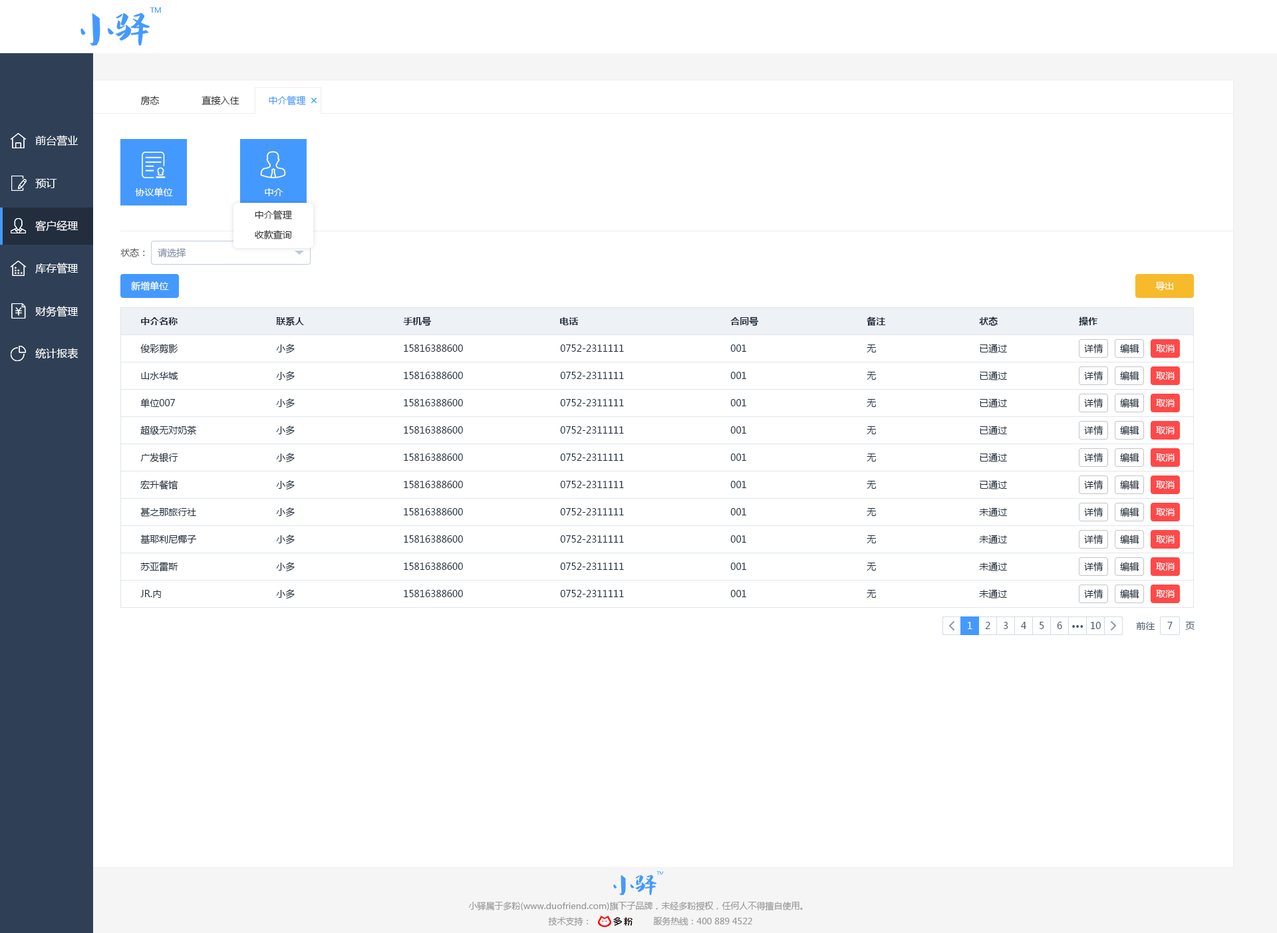
<style>
.page{position:relative;width:1277px;height:933px;background:#ffffff}
.page>*{position:absolute;margin:0}
.t1{font:9.3px "MicrosoftYaHei";color:#333333}
.t2{font:9.3px "MicrosoftYaHei";color:#4499ff}
.t3{font:10.6px "MicrosoftYaHei";color:#ffffff}
.t4{font:9.3px "MicrosoftYaHei";color:#ffffff}
.t5{font:9.3px "MicrosoftYaHei";color:#505050}
.t6{font:9.3px "MicrosoftYaHei";color:#8391a5}
.t7{font:9.3px "MicrosoftYaHei-Bold";color:#1f2d3d}
.t8{font:9.3px "MicrosoftYaHei";color:#1f2d3d}
.t9{font:9.3px "MicrosoftYaHei";color:#48576a}
.t10{font:9.3px "MicrosoftYaHei-Bold";color:#48576a}
.t11{font:8.6px "MicrosoftYaHei";color:#999999}
</style>
<div class="page">
<p class="t1" style="left:140px;top:96px;width:20px;height:9px">房态</p>
<p class="t1" style="left:202px;top:96px;width:38px;height:9px">直接入住</p>
<p class="t2" style="left:269px;top:96px;width:37px;height:10px">中介管理</p>
<p class="t3" style="left:35px;top:135px;width:44px;height:11px">前台营业</p>
<p class="t3" style="left:35px;top:178px;width:22px;height:10px">预订</p>
<p class="t4" style="left:135px;top:188px;width:38px;height:9px">协议单位</p>
<p class="t4" style="left:265px;top:188px;width:18px;height:8px">中介</p>
<p class="t3" style="left:35px;top:220px;width:44px;height:12px">客户经理</p>
<p class="t1" style="left:255px;top:210px;width:37px;height:10px">中介管理</p>
<p class="t1" style="left:255px;top:230px;width:37px;height:10px">收款查询</p>
<p class="t5" style="left:120px;top:248px;width:25px;height:9px">状态：</p>
<p class="t6" style="left:158px;top:248px;width:28px;height:9px">请选择</p>
<p class="t3" style="left:35px;top:263px;width:44px;height:11px">库存管理</p>
<p class="t4" style="left:131px;top:281px;width:38px;height:10px">新增单位</p>
<p class="t4" style="left:1156px;top:281px;width:18px;height:10px">导出</p>
<p class="t3" style="left:35px;top:306px;width:44px;height:11px">财务管理</p>
<p class="t7" style="left:141px;top:317px;width:37px;height:8px">中介名称</p>
<p class="t7" style="left:276px;top:317px;width:28px;height:9px">联系人</p>
<p class="t7" style="left:403px;top:317px;width:28px;height:9px">手机号</p>
<p class="t7" style="left:560px;top:317px;width:19px;height:8px">电话</p>
<p class="t7" style="left:731px;top:317px;width:27px;height:9px">合同号</p>
<p class="t7" style="left:867px;top:317px;width:19px;height:9px">备注</p>
<p class="t7" style="left:979px;top:317px;width:19px;height:9px">状态</p>
<p class="t7" style="left:1079px;top:317px;width:19px;height:9px">操作</p>
<p class="t3" style="left:35px;top:348px;width:44px;height:11px">统计报表</p>
<p class="t8" style="left:140px;top:344px;width:38px;height:10px">俊彩剪影</p>
<p class="t8" style="left:276px;top:344px;width:19px;height:10px">小多</p>
<p class="t8" style="left:404px;top:345px;width:59px;height:7px">15816388600</p>
<p class="t8" style="left:560px;top:345px;width:64px;height:7px">0752-2311111</p>
<p class="t8" style="left:731px;top:345px;width:16px;height:7px">001</p>
<p class="t8" style="left:867px;top:345px;width:9px;height:8px">无</p>
<p class="t8" style="left:980px;top:344px;width:27px;height:9px">已通过</p>
<p class="t8" style="left:1084px;top:344px;width:20px;height:9px">详情</p>
<p class="t8" style="left:1120px;top:344px;width:20px;height:9px">编辑</p>
<p class="t4" style="left:1156px;top:345px;width:19px;height:8px">取消</p>
<p class="t8" style="left:141px;top:372px;width:37px;height:8px">山水华城</p>
<p class="t8" style="left:276px;top:371px;width:19px;height:10px">小多</p>
<p class="t8" style="left:404px;top:372px;width:59px;height:7px">15816388600</p>
<p class="t8" style="left:560px;top:372px;width:64px;height:7px">0752-2311111</p>
<p class="t8" style="left:731px;top:372px;width:16px;height:7px">001</p>
<p class="t8" style="left:867px;top:372px;width:9px;height:8px">无</p>
<p class="t8" style="left:980px;top:371px;width:27px;height:10px">已通过</p>
<p class="t8" style="left:1084px;top:371px;width:20px;height:10px">详情</p>
<p class="t8" style="left:1120px;top:371px;width:20px;height:10px">编辑</p>
<p class="t4" style="left:1156px;top:372px;width:19px;height:8px">取消</p>
<p class="t8" style="left:140px;top:399px;width:35px;height:9px">单位007</p>
<p class="t8" style="left:276px;top:399px;width:19px;height:10px">小多</p>
<p class="t8" style="left:404px;top:399px;width:59px;height:8px">15816388600</p>
<p class="t8" style="left:560px;top:399px;width:64px;height:8px">0752-2311111</p>
<p class="t8" style="left:731px;top:399px;width:16px;height:8px">001</p>
<p class="t8" style="left:867px;top:399px;width:9px;height:8px">无</p>
<p class="t8" style="left:980px;top:399px;width:27px;height:9px">已通过</p>
<p class="t8" style="left:1084px;top:399px;width:20px;height:9px">详情</p>
<p class="t8" style="left:1120px;top:399px;width:20px;height:9px">编辑</p>
<p class="t4" style="left:1156px;top:399px;width:19px;height:8px">取消</p>
<p class="t8" style="left:140px;top:426px;width:57px;height:9px">超级无对奶茶</p>
<p class="t8" style="left:276px;top:426px;width:19px;height:10px">小多</p>
<p class="t8" style="left:980px;top:426px;width:27px;height:9px">已通过</p>
<p class="t8" style="left:1084px;top:426px;width:20px;height:9px">详情</p>
<p class="t8" style="left:1120px;top:426px;width:20px;height:9px">编辑</p>
<p class="t8" style="left:404px;top:426px;width:59px;height:8px">15816388600</p>
<p class="t8" style="left:560px;top:426px;width:64px;height:8px">0752-2311111</p>
<p class="t8" style="left:731px;top:426px;width:16px;height:8px">001</p>
<p class="t8" style="left:867px;top:426px;width:9px;height:8px">无</p>
<p class="t4" style="left:1156px;top:426px;width:19px;height:8px">取消</p>
<p class="t8" style="left:140px;top:453px;width:38px;height:9px">广发银行</p>
<p class="t8" style="left:276px;top:453px;width:19px;height:10px">小多</p>
<p class="t8" style="left:404px;top:454px;width:59px;height:7px">15816388600</p>
<p class="t8" style="left:560px;top:454px;width:64px;height:7px">0752-2311111</p>
<p class="t8" style="left:731px;top:454px;width:16px;height:7px">001</p>
<p class="t8" style="left:867px;top:454px;width:9px;height:8px">无</p>
<p class="t8" style="left:980px;top:453px;width:27px;height:9px">已通过</p>
<p class="t8" style="left:1084px;top:453px;width:20px;height:9px">详情</p>
<p class="t8" style="left:1120px;top:453px;width:20px;height:9px">编辑</p>
<p class="t4" style="left:1156px;top:454px;width:19px;height:8px">取消</p>
<p class="t8" style="left:140px;top:480px;width:38px;height:10px">宏升餐馆</p>
<p class="t8" style="left:276px;top:480px;width:19px;height:10px">小多</p>
<p class="t8" style="left:404px;top:481px;width:59px;height:7px">15816388600</p>
<p class="t8" style="left:560px;top:481px;width:64px;height:7px">0752-2311111</p>
<p class="t8" style="left:731px;top:481px;width:16px;height:7px">001</p>
<p class="t8" style="left:867px;top:481px;width:9px;height:8px">无</p>
<p class="t8" style="left:980px;top:480px;width:27px;height:10px">已通过</p>
<p class="t8" style="left:1084px;top:480px;width:20px;height:10px">详情</p>
<p class="t8" style="left:1120px;top:480px;width:20px;height:10px">编辑</p>
<p class="t4" style="left:1156px;top:481px;width:19px;height:8px">取消</p>
<p class="t8" style="left:140px;top:508px;width:56px;height:9px">甚之那旅行社</p>
<p class="t8" style="left:276px;top:508px;width:19px;height:10px">小多</p>
<p class="t8" style="left:404px;top:508px;width:59px;height:8px">15816388600</p>
<p class="t8" style="left:560px;top:508px;width:64px;height:8px">0752-2311111</p>
<p class="t8" style="left:731px;top:508px;width:16px;height:8px">001</p>
<p class="t8" style="left:867px;top:508px;width:9px;height:8px">无</p>
<p class="t8" style="left:979px;top:508px;width:28px;height:9px">未通过</p>
<p class="t8" style="left:1084px;top:508px;width:20px;height:9px">详情</p>
<p class="t8" style="left:1120px;top:508px;width:20px;height:9px">编辑</p>
<p class="t4" style="left:1156px;top:508px;width:19px;height:8px">取消</p>
<p class="t8" style="left:140px;top:535px;width:57px;height:9px">基耶利尼椰子</p>
<p class="t8" style="left:276px;top:535px;width:19px;height:10px">小多</p>
<p class="t8" style="left:404px;top:536px;width:59px;height:7px">15816388600</p>
<p class="t8" style="left:560px;top:536px;width:64px;height:7px">0752-2311111</p>
<p class="t8" style="left:731px;top:536px;width:16px;height:7px">001</p>
<p class="t8" style="left:867px;top:536px;width:9px;height:8px">无</p>
<p class="t8" style="left:979px;top:535px;width:28px;height:9px">未通过</p>
<p class="t8" style="left:1084px;top:535px;width:20px;height:9px">详情</p>
<p class="t8" style="left:1120px;top:535px;width:20px;height:9px">编辑</p>
<p class="t4" style="left:1156px;top:536px;width:19px;height:8px">取消</p>
<p class="t8" style="left:140px;top:562px;width:38px;height:10px">苏亚雷斯</p>
<p class="t8" style="left:276px;top:562px;width:19px;height:10px">小多</p>
<p class="t8" style="left:404px;top:563px;width:59px;height:7px">15816388600</p>
<p class="t8" style="left:560px;top:563px;width:64px;height:7px">0752-2311111</p>
<p class="t8" style="left:731px;top:563px;width:16px;height:7px">001</p>
<p class="t8" style="left:867px;top:563px;width:9px;height:8px">无</p>
<p class="t8" style="left:979px;top:562px;width:28px;height:10px">未通过</p>
<p class="t8" style="left:1084px;top:562px;width:20px;height:10px">详情</p>
<p class="t8" style="left:1120px;top:562px;width:20px;height:10px">编辑</p>
<p class="t4" style="left:1156px;top:563px;width:19px;height:8px">取消</p>
<p class="t8" style="left:140px;top:590px;width:21px;height:8px">JR.内</p>
<p class="t8" style="left:276px;top:589px;width:19px;height:10px">小多</p>
<p class="t8" style="left:404px;top:590px;width:59px;height:7px">15816388600</p>
<p class="t8" style="left:560px;top:590px;width:64px;height:7px">0752-2311111</p>
<p class="t8" style="left:731px;top:590px;width:16px;height:7px">001</p>
<p class="t8" style="left:867px;top:590px;width:9px;height:8px">无</p>
<p class="t8" style="left:979px;top:589px;width:28px;height:10px">未通过</p>
<p class="t8" style="left:1084px;top:589px;width:20px;height:10px">详情</p>
<p class="t8" style="left:1120px;top:589px;width:20px;height:10px">编辑</p>
<p class="t4" style="left:1156px;top:590px;width:19px;height:8px">取消</p>
<p class="t4" style="left:968px;top:622px;width:5px;height:7px">1</p>
<p class="t9" style="left:985px;top:622px;width:6px;height:7px">2</p>
<p class="t9" style="left:1003px;top:622px;width:6px;height:7px">3</p>
<p class="t9" style="left:1021px;top:622px;width:6px;height:7px">4</p>
<p class="t9" style="left:1040px;top:622px;width:5px;height:7px">5</p>
<p class="t9" style="left:1057px;top:622px;width:6px;height:7px">6</p>
<p class="t10" style="left:1073px;top:625px;width:11px;height:3px">···</p>
<p class="t9" style="left:1091px;top:622px;width:10px;height:7px">10</p>
<p class="t9" style="left:1136px;top:622px;width:20px;height:8px">前往</p>
<p class="t9" style="left:1168px;top:622px;width:5px;height:7px">7</p>
<p class="t9" style="left:1186px;top:622px;width:9px;height:8px">页</p>
<p class="t11" style="left:468px;top:902px;width:335px;height:9px">小驿属于多粉(www.duofriend.com)旗下子品牌，未经多粉授权，任何人不得擅自使用。</p>
<p class="t11" style="left:548px;top:917px;width:40px;height:9px">技术支持：</p>
<p class="t11" style="left:653px;top:917px;width:99px;height:9px">服务热线：400 889 4522</p>
</div>
